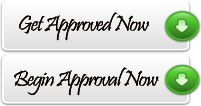
<style>
.page{position:relative;width:201px;height:106px}
.page>*{position:absolute;margin:0}
.t1{font:22.3px "Pristina-Regular";letter-spacing:-0.05em;color:#0b0202;scale:1.08 1}
</style>
<div class="page">
<p class="t1" style="left:19px;top:12px;width:131px;height:29px">Get Approved Now</p>
<p class="t1" style="left:19px;top:12px;width:131px;height:29px">Get Approved Now</p>
<p class="t1" style="left:14px;top:67px;width:145px;height:29px">Begin Approval Now</p>
<p class="t1" style="left:14px;top:67px;width:145px;height:29px">Begin Approval Now</p>
</div>
